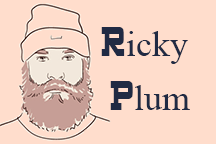
<style>
.page{position:relative;width:216px;height:144px;background:#ffddcc}
.page>*{position:absolute;margin:0}
.t1{font:36px "TimesNewRomanPSMT";color:#202a43}
.t2{font:36px "Highlands-Regular";color:#202a43}
</style>
<div class="page">
<p class="t1" style="left:101px;top:27px;width:87px;height:37px"><span class="t2">R</span>icky</p>
<p class="t1" style="left:110px;top:81px;width:80px;height:29px"><span class="t2">P</span>lum</p>
</div>
